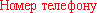
<style>
.page{position:relative;width:97px;height:13px;background:#ffffff}
.page>*{position:absolute;margin:0}
.t1{font:14px "TimesNewRomanPSMT";color:#e70e19}
</style>
<div class="page">
<p class="t1" style="left:0px;top:0px;width:97px;height:13px">Номер телефону</p>
</div>
